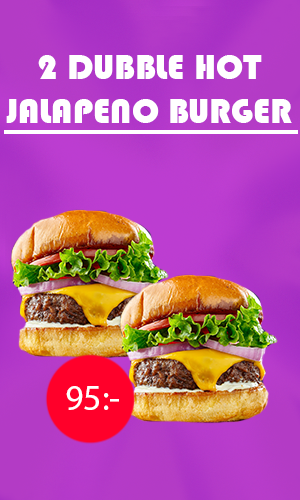
<style>
.page{position:relative;width:300px;height:500px}
.page>*{position:absolute;margin:0}
.t1{font:36px "Bauhaus93";color:#ffffff}
.t2{font:36px "MyriadPro-Regular";color:#ffffff}
</style>
<div class="page">
<p class="t1" style="left:6px;top:55px;width:286px;height:68px;text-align:center">2 DUBBLE HOT JALAPENO BURGER</p>
<p class="t2" style="left:66px;top:386px;width:53px;height:24px">95:-</p>
</div>
